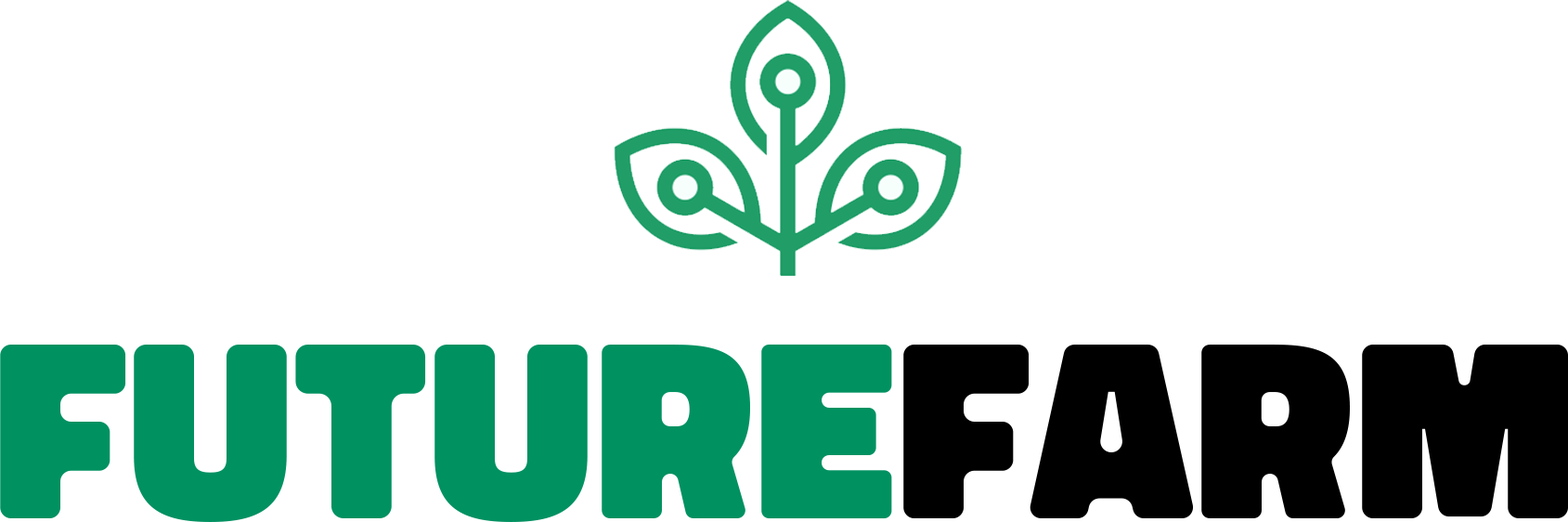
<style>
.page{position:relative;width:1568px;height:522px;background:#ffffff}
.page>*{position:absolute;margin:0}
.t1{font:259.2px "DonJose-Black";color:#009161}
.t2{font:259.2px "DonJose-Black";color:#000000}
</style>
<div class="page">
<p class="t1" style="left:0px;top:343px;width:1568px;height:179px">FUTURE<span class="t2">Farm</span></p>
</div>
